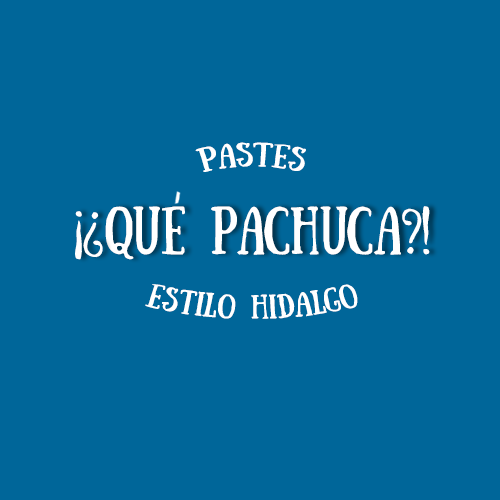
<style>
.page{position:relative;width:500px;height:500px;background:#006699}
.page>*{position:absolute;margin:0}
.t1{font:24px "Sunday";color:#ffffff;scale:1.17 1}
.t2{font:48px "Sunday";color:#ffffff}
.t3{font:48px "MyriadPro-Regular";color:#ffffff}
</style>
<div class="page">
<p class="t1" style="left:195px;top:142px;width:111px;height:30px">pASTES</p>
<p class="t2" style="left:105px;top:206px;width:325px;height:54px"><span class="t3">   </span>QuE pachuca?!</p>
<p class="t2" style="left:75px;top:211px;width:28px;height:49px;rotate:-179deg">?!</p>
<p class="t1" style="left:145px;top:284px;width:213px;height:35px">eSTILO HIDALGO</p>
</div>
